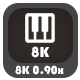
<style>
.page{position:relative;width:80px;height:80px;background:#464646}
.page>*{position:absolute;margin:0}
.t1{font:15px "Bauhaus93";color:#ffffff}
.t2{font:12px "Bauhaus93";color:#ffffff}
</style>
<div class="page">
<p class="t1" style="left:31px;top:46px;width:18px;height:12px">8K</p>
<p class="t2" style="left:15px;top:65px;width:49px;height:10px">8K 0.90x</p>
</div>
